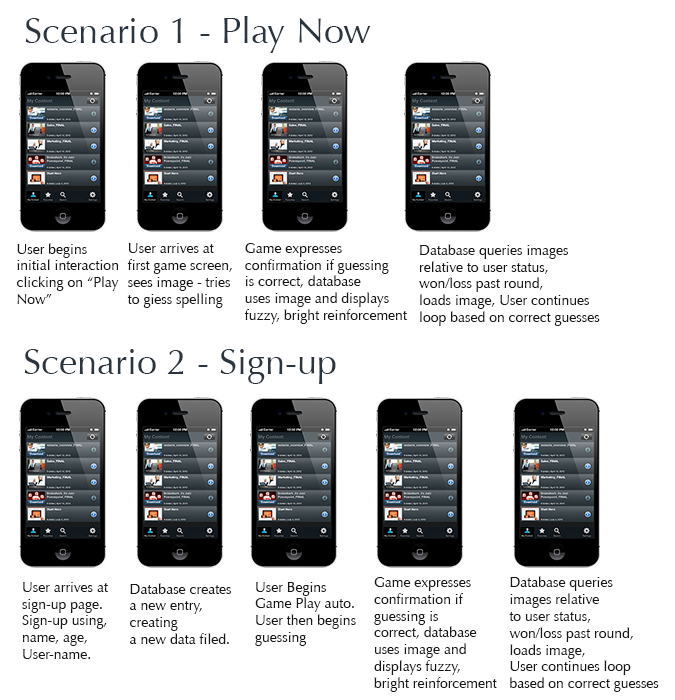
<style>
.page{position:relative;width:675px;height:700px;background:#ffffff}
.page>*{position:absolute;margin:0}
.t1{font:36px "Optima-Regular";color:#2a3540}
.t2{font:14px "Optima-Regular";color:#171717}
</style>
<div class="page">
<p class="t1" style="left:25px;top:16px;width:346px;height:37px">Scenario 1 - Play Now</p>
<p class="t2" style="left:16px;top:243px;width:103px;height:61px">User begins <br>initial interaction<br>clicking on “Play <br>Now”</p>
<p class="t2" style="left:127px;top:243px;width:105px;height:65px">User arrives at<br>first game screen, <br>sees image - tries <br>to giess spelling</p>
<p class="t2" style="left:244px;top:243px;width:163px;height:81px">Game expresses <br>confirmation if guessing <br>is correct, database<br>uses image and displays <br>fuzzy, bright reinforcement</p>
<p class="t2" style="left:419px;top:244px;width:181px;height:82px">Database queries images<br>relative to user status, <br>won/loss past round, <br>loads image, User continues<br>loop based on correct guesses</p>
<p class="t1" style="left:24px;top:349px;width:312px;height:35px">Scenario 2 - Sign-up</p>
<p class="t2" style="left:22px;top:582px;width:86px;height:77px">User arrives at<br>sign-up page.<br>Sign-up using, <br>name, age, <br>User-name.</p>
<p class="t2" style="left:255px;top:582px;width:101px;height:64px">User Begins <br>Game Play auto.<br>User then begins <br>guessing</p>
<p class="t2" style="left:374px;top:577px;width:123px;height:115px">Game expresses <br>confirmation if <br>guessing is <br>correct, database<br>uses image and <br>displays fuzzy, <br>bright reinforcement</p>
<p class="t2" style="left:509px;top:576px;width:150px;height:116px">Database queries <br>images relative <br>to user status, <br>won/loss past round, <br>loads image, <br>User continues loop <br>based on correct guesses</p>
<p class="t2" style="left:129px;top:583px;width:102px;height:61px">Database creates<br>a new entry, <br>creating<br>a new data filed.</p>
</div>
